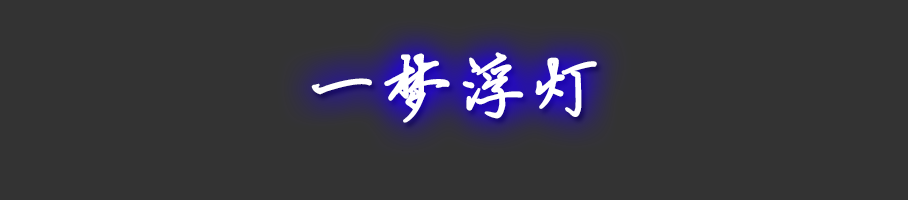
<style>
.page{position:relative;width:908px;height:200px;background:#333333}
.page>*{position:absolute;margin:0}
.t1{font:72px "Jyinbixinsu";color:#ffffff;font-weight:bold}
</style>
<div class="page">
<p class="t1" style="left:311px;top:52px;width:286px;height:71px">一梦浮灯</p>
</div>
